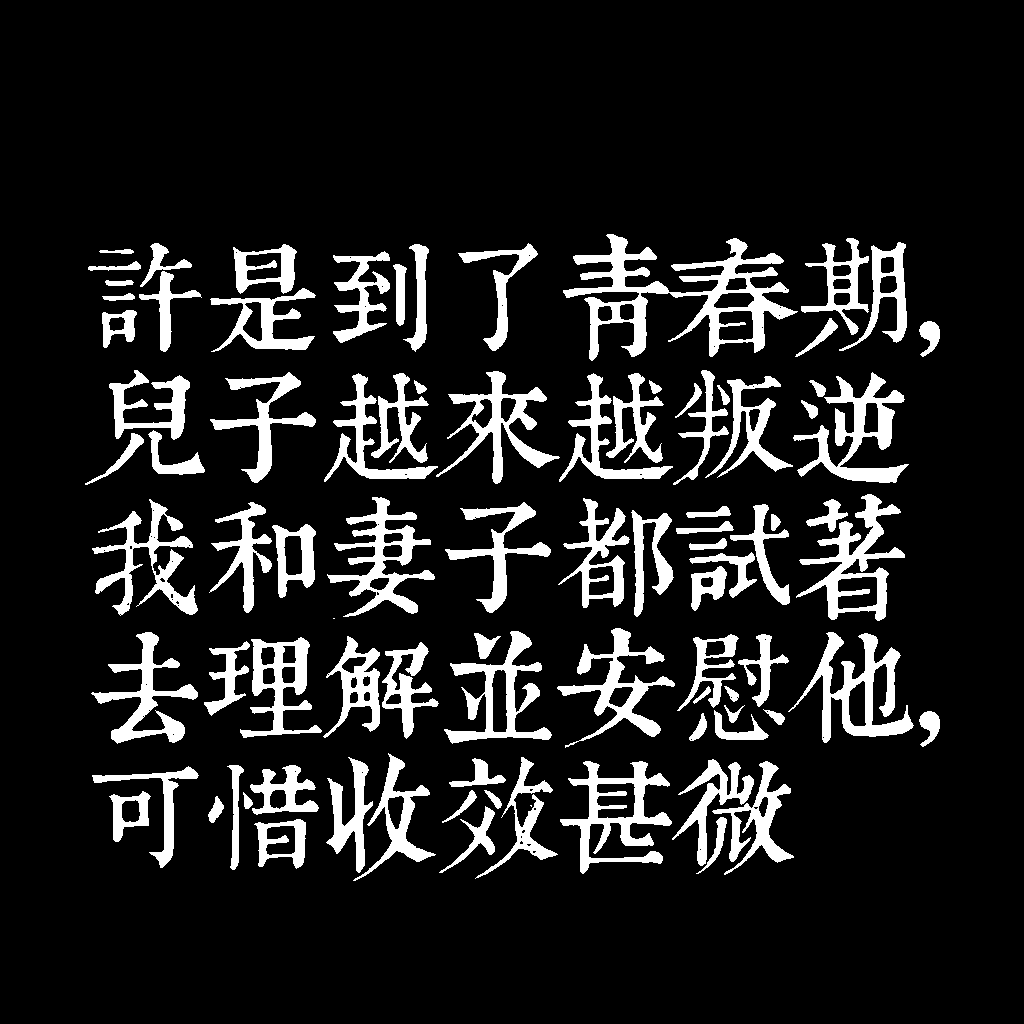
<style>
.page{position:relative;width:1024px;height:1024px;background:#000000}
.page>*{position:absolute;margin:0}
.t1{font:120px/130px "TpldKhangXiDictTrial";letter-spacing:-0.02em;color:#ffffff}
</style>
<div class="page">
<p class="t1" style="left:85px;top:234px;width:855px;height:647px">許是到了青春期，<br>兒子越來越叛逆<br>我和妻子都試著<br>去理解並安慰他，<br>可惜收效甚微</p>
</div>
